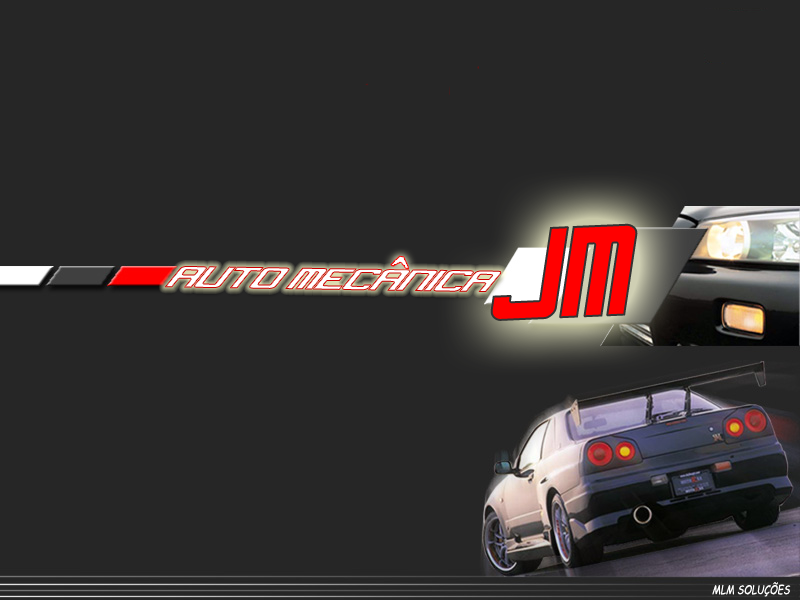
<style>
.page{position:relative;width:800px;height:600px;background:#262626}
.page>*{position:absolute;margin:0}
.t1{font:128.2px "NeverSayDie";color:#ff0000;font-weight:bold;font-style:italic;scale:0.7 1}
.t2{font:32.9px "NeverSayDie";font-style:italic;scale:1.12 1}
.t3{font:12px "ComicSansMS";color:#ffffff;font-style:italic;scale:0.8 1}
</style>
<div class="page">
<p class="t1" style="left:490px;top:223px;width:148px;height:98px;rotate:-2deg">JM</p>
<p class="t2" style="left:164px;top:266px;width:338px;height:26px;rotate:1deg">AUTO MECANICA</p>
<p class="t3" style="left:712px;top:582px;width:79px;height:15px">MLM SOLUÇÕES</p>
</div>
